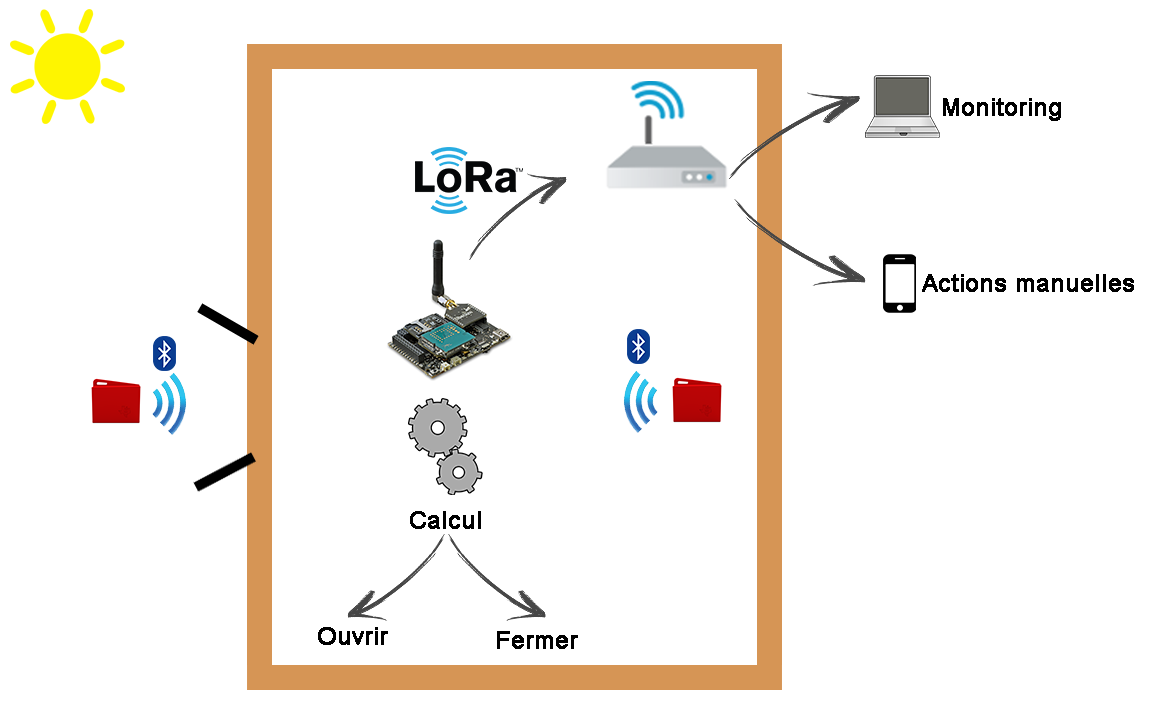
<style>
.page{position:relative;width:1170px;height:723px;background:#ffffff}
.page>*{position:absolute;margin:0}
.t1{font:24px "ArialMT";color:#000000;font-weight:bold}
</style>
<div class="page">
<p class="t1" style="left:943px;top:98px;width:118px;height:23px">Monitoring</p>
<p class="t1" style="left:922px;top:274px;width:212px;height:18px">Actions manuelles</p>
<p class="t1" style="left:410px;top:511px;width:71px;height:18px">Calcul</p>
<p class="t1" style="left:318px;top:627px;width:70px;height:18px">Ouvrir</p>
<p class="t1" style="left:497px;top:631px;width:81px;height:18px">Fermer</p>
</div>
